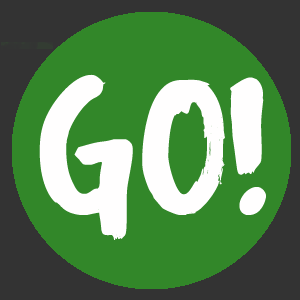
<style>
.page{position:relative;width:300px;height:300px;background:#328729}
.page>*{position:absolute;margin:0}
.t1{font:146px "FromWhereYouAre";color:#fffefe;scale:0.86 1}
</style>
<div class="page">
<p class="t1" style="left:39px;top:74px;width:227px;height:166px">GO!</p>
</div>
